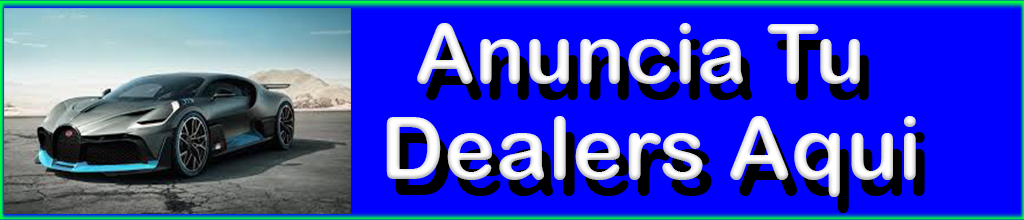
<style>
.page{position:relative;width:1024px;height:220px;background:#0000ff}
.page>*{position:absolute;margin:0}
.t1{font:83.3px "ArialRoundedMTBold";color:#ffffff}
.t2{font:87.1px "ArialRoundedMTBold";color:#ffffff}
</style>
<div class="page">
<p class="t1" style="left:417px;top:23px;width:443px;height:61px">Anuncia Tu</p>
<p class="t2" style="left:386px;top:116px;width:530px;height:81px">Dealers Aqui</p>
</div>
